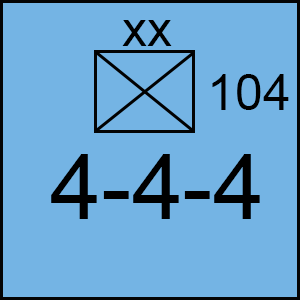
<style>
.page{position:relative;width:300px;height:300px;background:#74b4e4}
.page>*{position:absolute;margin:0}
.t1{font:50px "ArialMT";color:#000000}
.t2{font:91.7px "ArialMT";color:#000000}
</style>
<div class="page">
<p class="t1" style="left:122px;top:20px;width:50px;height:26px">xx</p>
<p class="t1" style="left:212px;top:74px;width:77px;height:36px">104</p>
<p class="t2" style="left:51px;top:154px;width:209px;height:65px">4-4-4</p>
</div>
